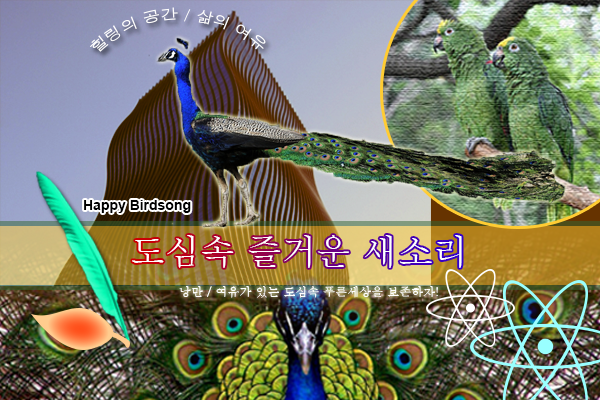
<style>
.page{position:relative;width:600px;height:400px}
.page>*{position:absolute;margin:0}
.t1{font:15px "Dotum";color:#ffffff}
.t2{font:13.8px "Arial-BoldMT";color:#000000}
.t3{font:34.6px "Batang";color:#ffffff}
.t4{font:11.8px "Batang";color:#ffffff}
</style>
<div class="page">
<p class="t1" style="left:90px;top:7px;width:176px;height:45px">힐링의 공간 / 삶의 여유</p>
<p class="t2" style="left:84px;top:200px;width:107px;height:13px">Happy Birdsong</p>
<p class="t3" style="left:132px;top:235px;width:330px;height:33px">도심속 즐거운 새소리</p>
<p class="t4" style="left:179px;top:286px;width:259px;height:12px">낭만 / 여유가 있는 도심속 푸른세상을 보존하자!</p>
</div>
